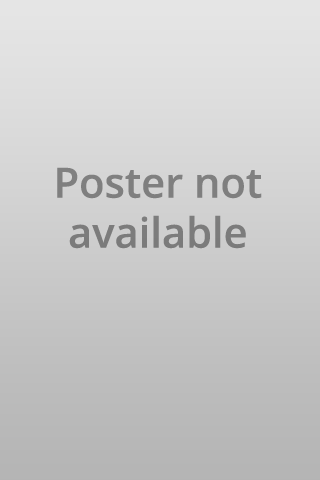
<style>
.page{position:relative;width:320px;height:480px}
.page>*{position:absolute;margin:0}
.t1{font:41.7px "OpenSans-Semibold";color:#7e7e7e}
</style>
<div class="page">
<p class="t1" style="left:57px;top:167px;width:205px;height:82px;text-align:center">Poster not available</p>
</div>
